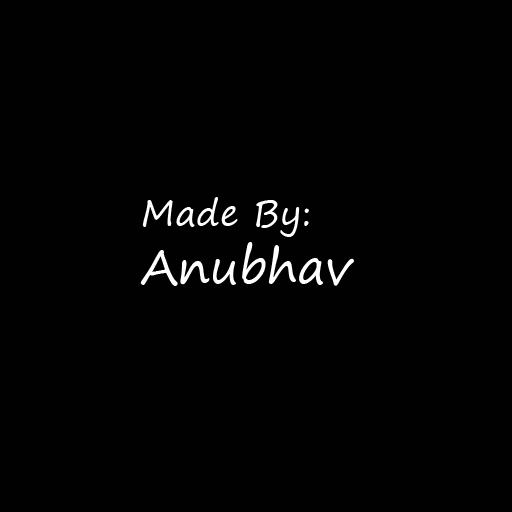
<style>
.page{position:relative;width:512px;height:512px;background:#010101}
.page>*{position:absolute;margin:0}
.t1{font:36px "SegoePrint";color:#ffffff}
.t2{font:48px "SegoePrint";color:#ffffff}
</style>
<div class="page">
<p class="t1" style="left:140px;top:197px;width:214px;height:89px">Made By:<br><span class="t2">Anubhav</span></p>
</div>
